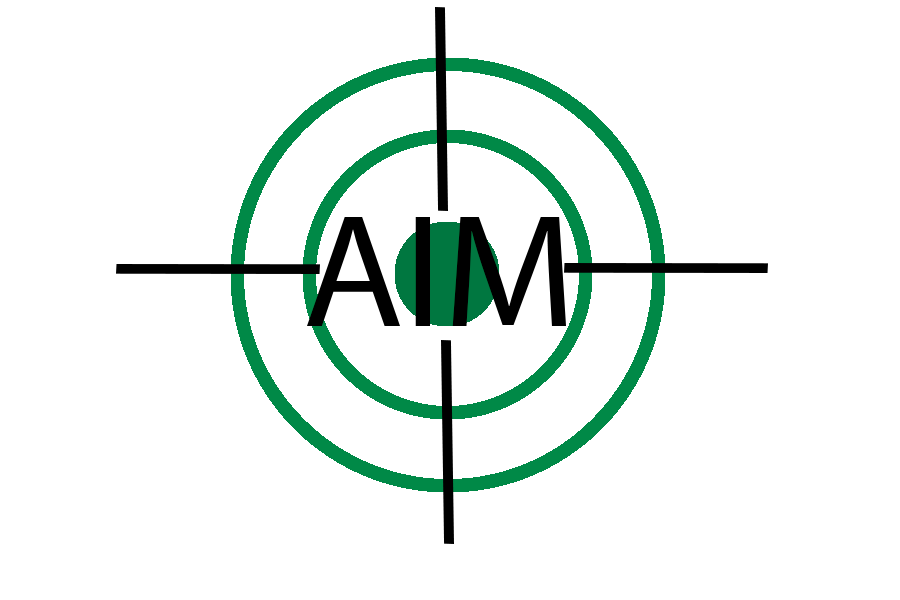
<style>
.page{position:relative;width:900px;height:600px;background:#ffffff}
.page>*{position:absolute;margin:0}
.t1{font:162px "MyriadPro-Regular";color:#000000}
</style>
<div class="page">
<p class="t1" style="left:307px;top:217px;width:259px;height:109px">AIM</p>
</div>
